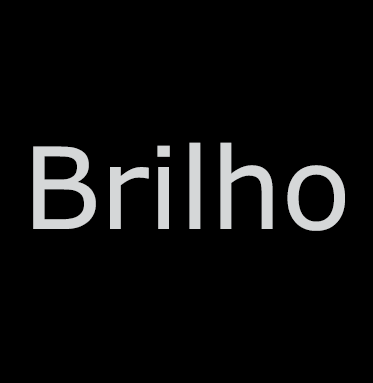
<style>
.page{position:relative;width:373px;height:383px;background:#000000}
.page>*{position:absolute;margin:0}
.t1{font:113.1px "Verdana";color:#d5d7d8}
</style>
<div class="page">
<p class="t1" style="left:33px;top:142px;width:312px;height:89px">Brilho</p>
</div>
